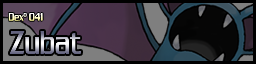
<style>
.page{position:relative;width:256px;height:64px}
.page>*{position:absolute;margin:0}
.t1{font:12px "ChaneyThinNormal"}
.t2{font:36px "ChaneyThinNormal"}
</style>
<div class="page">
<p class="t1" style="left:8px;top:13px;width:35px;height:8px">Dexº 041</p>
<p class="t2" style="left:9px;top:31px;width:72px;height:23px">Zubat</p>
</div>
